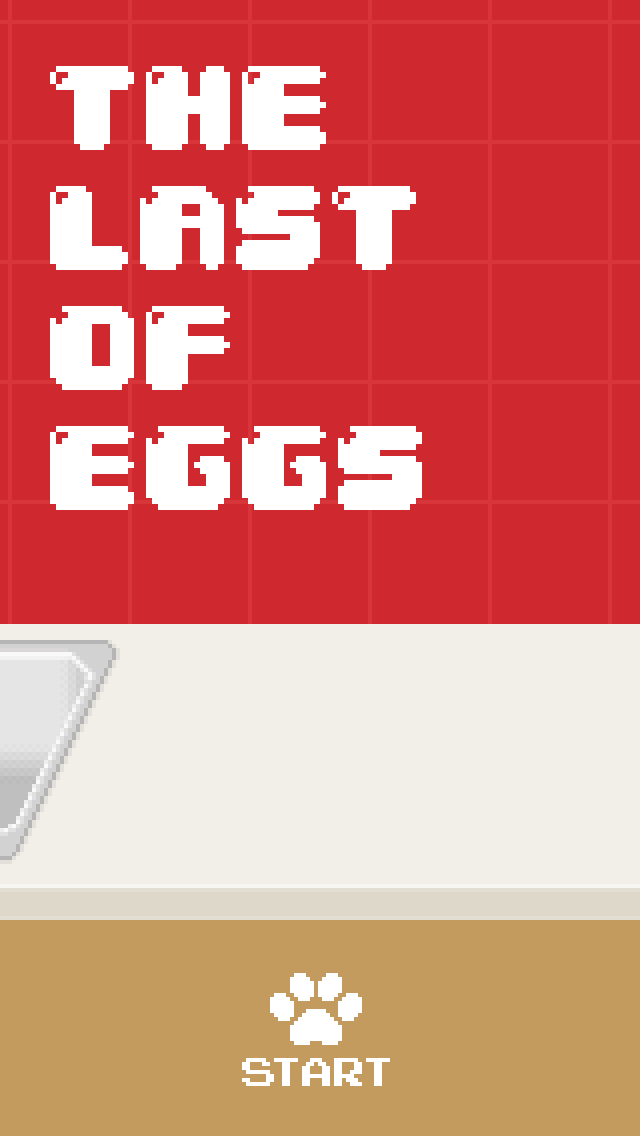
<style>
.page{position:relative;width:640px;height:1136px;background:#cf282f}
.page>*{position:absolute;margin:0}
.t1{font:102px/120px "04b30";color:#ffffff;text-transform:uppercase}
</style>
<div class="page">
<p class="t1" style="left:50px;top:66px;width:372px;height:444px">The<br>last<br>of<br>eggs</p>
</div>
